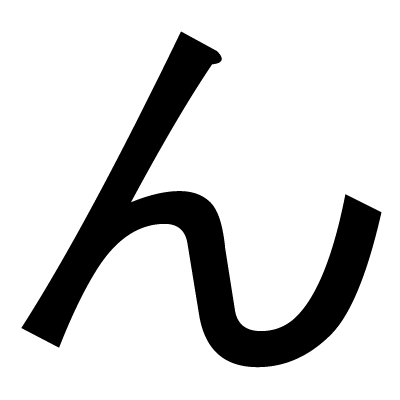
<style>
.page{position:relative;width:400px;height:400px;background:#ffffff}
.page>*{position:absolute;margin:0}
.t1{font:416.7px "MS-PGothic";color:#000000}
</style>
<div class="page">
<p class="t1" style="left:21px;top:31px;width:361px;height:337px">ん</p>
</div>
